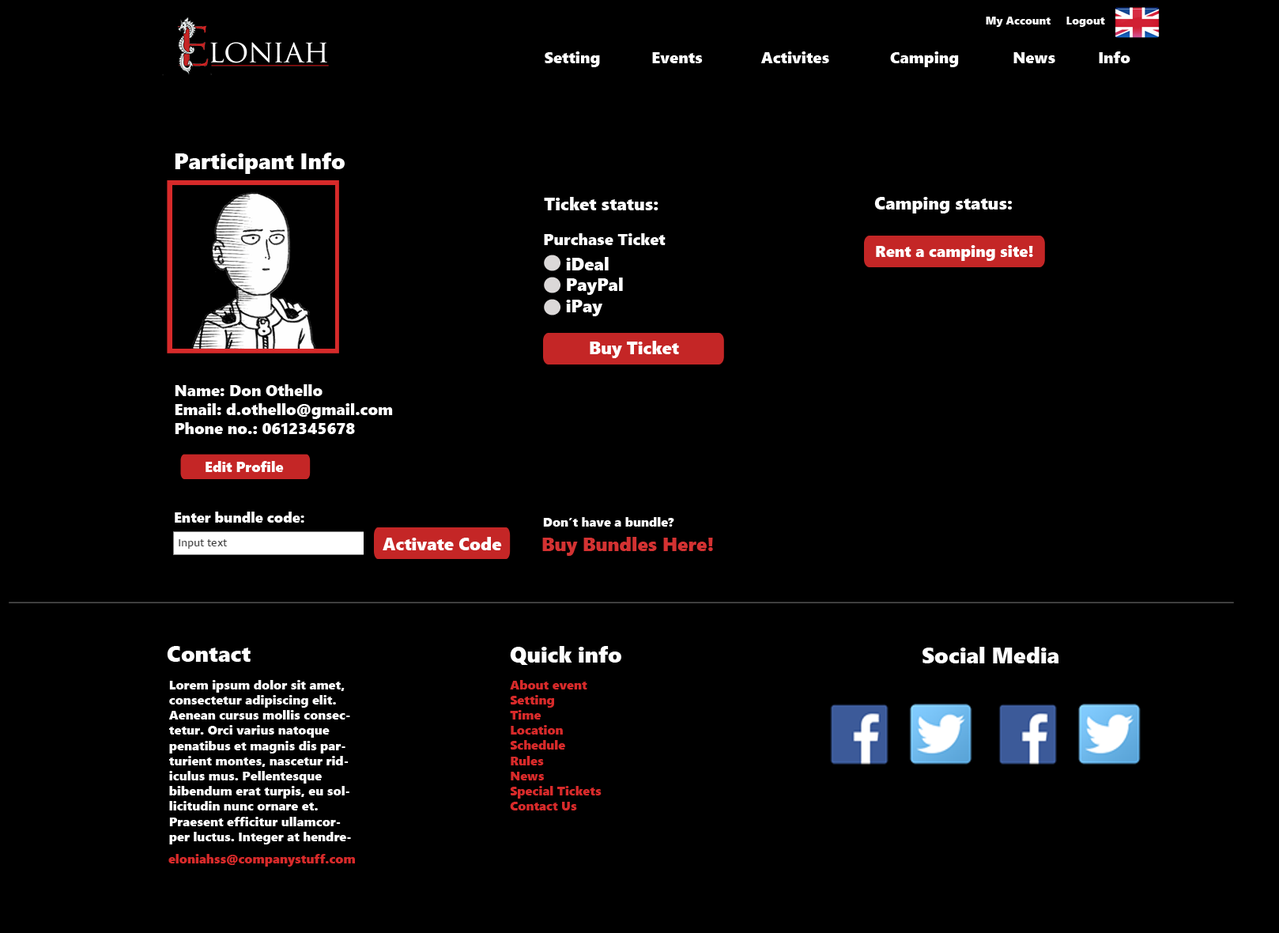
<style>
.page{position:relative;width:1279px;height:933px;background:#000000}
.page>*{position:absolute;margin:0}
.t1{font:11.1px "SegoeUIBlack";color:#ffffff}
.t2{font:15.8px "SegoeUIBlack";color:#ffffff}
.t3{font:22.1px "SegoeUIBlack";color:#ffffff}
.t4{font:17.4px "SegoeUIBlack";color:#ffffff}
.t5{font:14.2px "SegoeUIBlack";color:#ffffff}
.t6{font:12.6px "SegoeUIBlack";color:#ffffff}
.t7{font:19px "SegoeUIBlack";color:#d33232}
.t8{font:12.6px "SegoeUIBlack";color:#d72a2a}
</style>
<div class="page">
<p class="t1" style="left:985px;top:17px;width:120px;height:10px">My Account     Logout</p>
<p class="t2" style="left:545px;top:51px;width:585px;height:16px">Setting       Events      Activites   Camping     News     Info</p>
<p class="t3" style="left:175px;top:153px;width:170px;height:21px">Participant Info</p>
<p class="t4" style="left:544px;top:197px;width:114px;height:13px">Ticket status:</p>
<p class="t4" style="left:874px;top:197px;width:138px;height:16px">Camping status:</p>
<p class="t2" style="left:544px;top:233px;width:121px;height:12px">Purchase Ticket</p>
<p class="t2" style="left:876px;top:245px;width:157px;height:16px">Rent a camping site!</p>
<p class="t4" style="left:566px;top:257px;width:57px;height:59px">iDeal<br>PayPal<br>iPay</p>
<p class="t4" style="left:590px;top:341px;width:89px;height:17px">Buy Ticket</p>
<p class="t2" style="left:175px;top:384px;width:218px;height:50px">Name: Don Othello<br>Email: d.othello@gmail.com<br>Phone no.: 0612345678</p>
<p class="t5" style="left:205px;top:461px;width:79px;height:11px">Edit Profile</p>
<p class="t5" style="left:175px;top:511px;width:129px;height:11px">Enter bundle code:</p>
<p class="t6" style="left:543px;top:517px;width:131px;height:9px">Don’t have a bundle?</p>
<p class="t4" style="left:383px;top:537px;width:119px;height:13px">Activate Code</p>
<p class="t7" style="left:542px;top:537px;width:171px;height:19px">Buy Bundles Here!</p>
<p class="t3" style="left:167px;top:646px;width:84px;height:15px">Contact</p>
<p class="t3" style="left:510px;top:646px;width:111px;height:19px">Quick info</p>
<p class="t3" style="left:922px;top:646px;width:136px;height:17px">Social Media</p>
<p class="t6" style="left:168px;top:680px;width:183px;height:164px">Lorem ipsum dolor sit amet, consectetur adipiscing elit. Aenean cursus mollis consectetur. Orci varius natoque penatibus et magnis dis parturient montes, nascetur ridiculus mus. Pellentesque bibendum erat turpis, eu sollicitudin nunc ornare et. Praesent efficitur ullamcorper luctus. Integer at hendrerit odio. Vestibulum ante ipsum primis in faucibus orci luctus et ultrices posuere cubilia Curae; Sed varius turpis at turpis volutpat pellentesque. Vestibulum ultricies in urna ut volutpat. Suspendisse potenti.</p>
<p class="t8" style="left:510px;top:680px;width:91px;height:130px">About event<br>Setting<br>Time<br>Location<br>Schedule<br>Rules<br>News<br>Special Tickets<br>Contact Us</p>
<p class="t8" style="left:168px;top:854px;width:187px;height:12px">eloniahss@companystuff.com</p>
</div>
